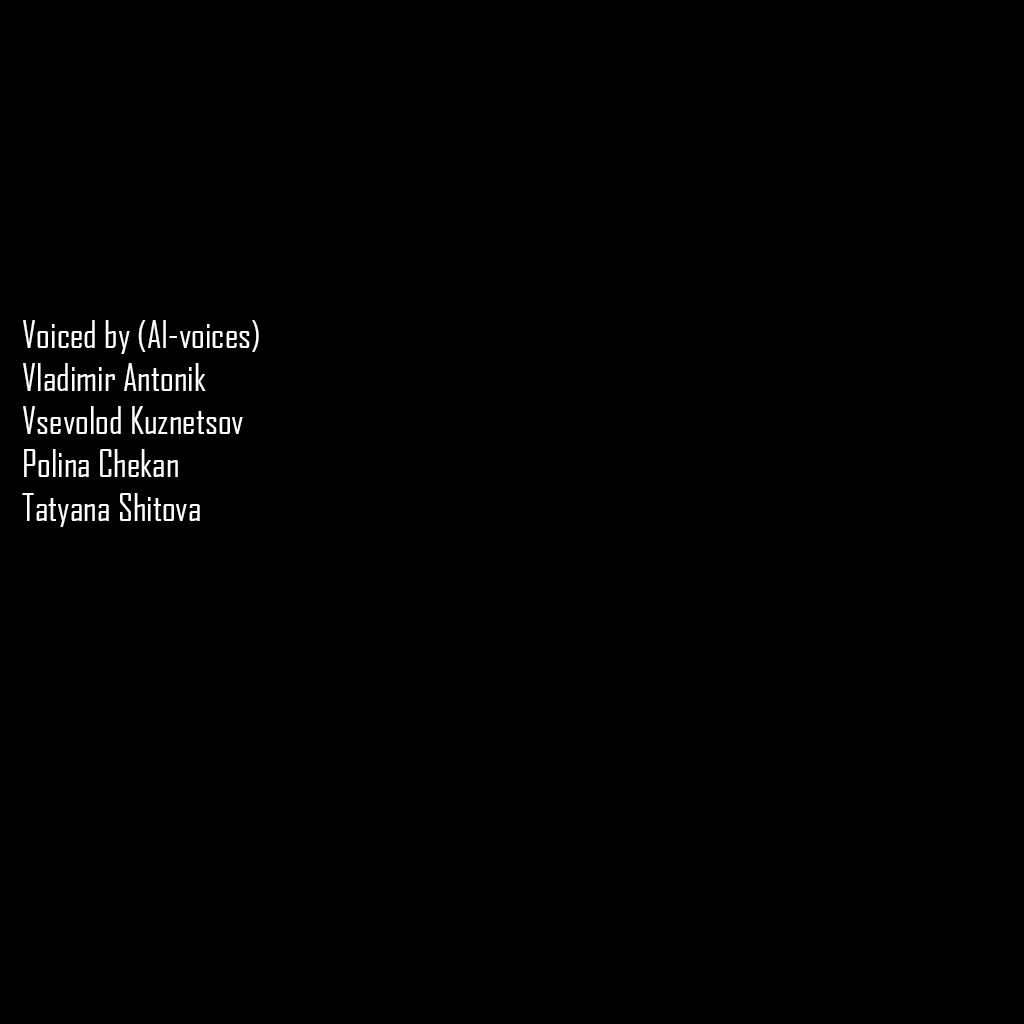
<style>
.page{position:relative;width:1024px;height:1024px;background:#000000}
.page>*{position:absolute;margin:0}
.t1{font:36px "AgencyFBCyrillic";color:#ffffff}
</style>
<div class="page">
<p class="t1" style="left:22px;top:320px;width:237px;height:207px">Voiced by (AI-voices)<br>Vladimir Antonik<br>Vsevolod Kuznetsov<br>Polina Chekan<br>Tatyana Shitova</p>
</div>
